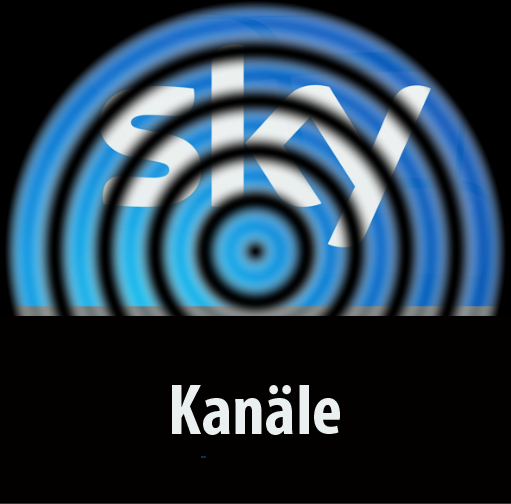
<style>
.page{position:relative;width:511px;height:504px;background:#030000}
.page>*{position:absolute;margin:0}
.t1{font:72px "MyriadPro-BoldCond";color:#eaefef}
</style>
<div class="page">
<p class="t1" style="left:172px;top:385px;width:168px;height:50px">Kanäle</p>
</div>
